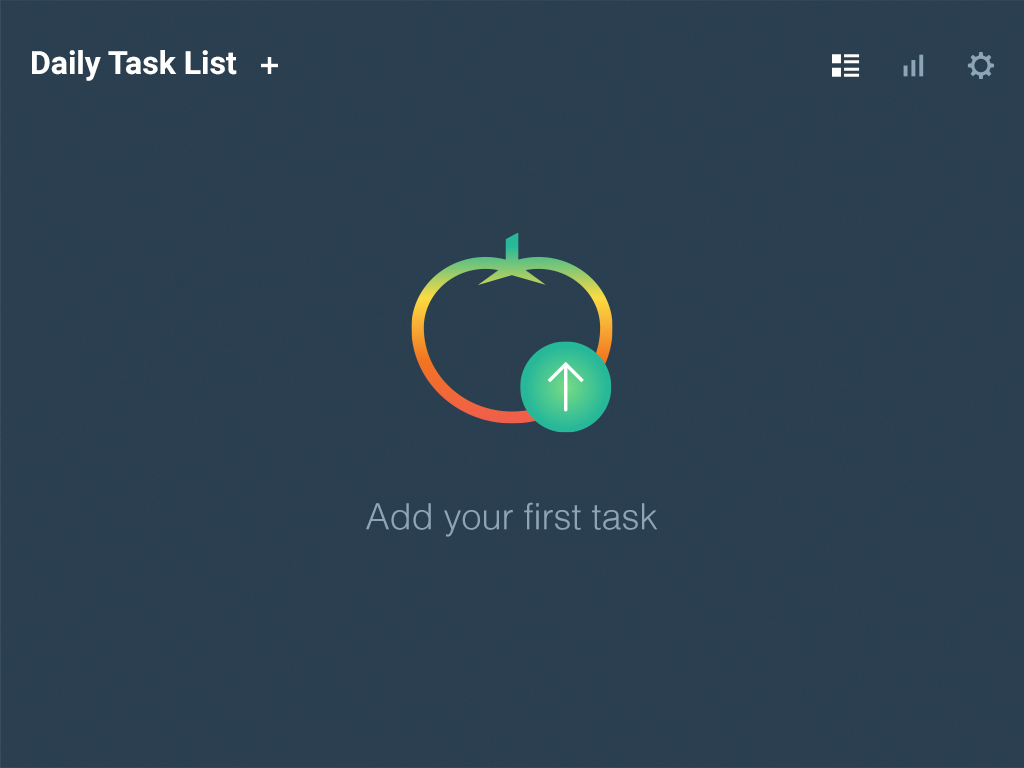
<style>
.page{position:relative;width:1024px;height:768px;background:#2a3f50}
.page>*{position:absolute;margin:0}
.t1{font:32px "Roboto-Bold";color:#ffffff}
.t2{font:36px "Helvetica-Light";color:#8da5b8}
</style>
<div class="page">
<p class="t1" style="left:32px;top:50px;width:205px;height:31px">Daily Task List</p>
<p class="t2" style="left:366px;top:502px;width:292px;height:35px">Add your first task</p>
</div>
